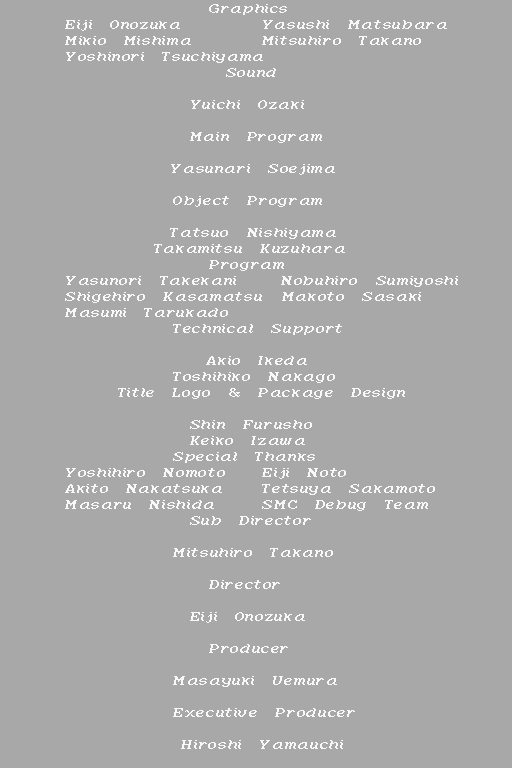
<style>
.page{position:relative;width:512px;height:768px;background:#a8a8a8}
.page>*{position:absolute;margin:0}
.t1{font:16px/16px "MarvelousATIvwf";letter-spacing:0.04em;color:#f8f8f8}
</style>
<div class="page">
<p class="t1" style="left:65px;top:4px;width:393px;height:745px">Graphics<br>Eiji Onozuka   Yasushi Matsubara<br>Mikio Mishima   Mitsuhiro Takano<br>Yoshinori Tsuchiyama<br>     Sound<br><br>    Yuichi Ozaki<br><br>    Main Program<br><br>    Yasunari Soejima<br><br>   Object Program<br><br>    Tatsuo Nishiyama<br>   Takamitsu Kuzuhara<br>    Program<br>Yasunori Takekani  Nobuhiro Sumiyoshi<br>Shigehiro Kasamatsu Makoto Sasaki<br>Masumi Tarukado<br>   Technical Support<br><br>     Akio Ikeda<br>   Toshihiko Nakago<br>  Title Logo &amp; Package Design<br><br>    Shin Furusho<br>    Keiko Izawa<br>   Special Thanks<br>Yoshihiro Nomoto  Eiji Noto<br>Akito Nakatsuka  Tetsuya Sakamoto<br>Masaru Nishida  SMC Debug Team<br>    Sub Director<br><br>   Mitsuhiro Takano<br><br>    Director<br><br>    Eiji Onozuka<br><br>    Producer<br><br>   Masayuki Uemura<br><br>   Executive Producer<br><br>    Hiroshi Yamauchi</p>
</div>
